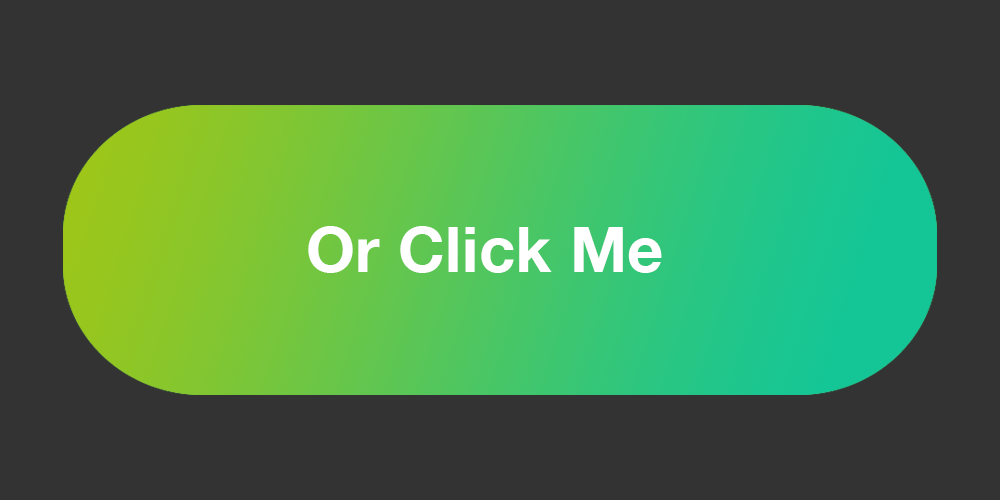
<style>
.page{position:relative;width:1000px;height:500px;background:#333333}
.page>*{position:absolute;margin:0}
.t1{font:62.5px "HelveticaNeue-Bold";letter-spacing:0.01em;color:#ffffff}
</style>
<div class="page">
<p class="t1" style="left:308px;top:226px;width:354px;height:47px">Or Click Me</p>
</div>
